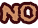
<style>
.page{position:relative;width:38px;height:28px;background:#3b080d}
.page>*{position:absolute;margin:0}
.t1{font:24px "TOBACCO";color:#c4845a;font-weight:bold}
</style>
<div class="page">
<p class="t1" style="left:2px;top:4px;width:35px;height:18px">NO</p>
</div>
